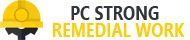
<style>
.page{position:relative;width:190px;height:40px;background:#ffffff}
.page>*{position:absolute;margin:0}
.t1{font:20px "SegoeUI-Bold";color:#31353d;scale:0.8 1}
.t2{font:20px "SegoeUI-Bold";color:#ffcd00;scale:0.8 1}
</style>
<div class="page">
<p class="t1" style="left:71px;top:6px;width:88px;height:14px">PC STRONG</p>
<p class="t2" style="left:53px;top:23px;width:132px;height:14px">REMEDIAL WORK</p>
</div>
